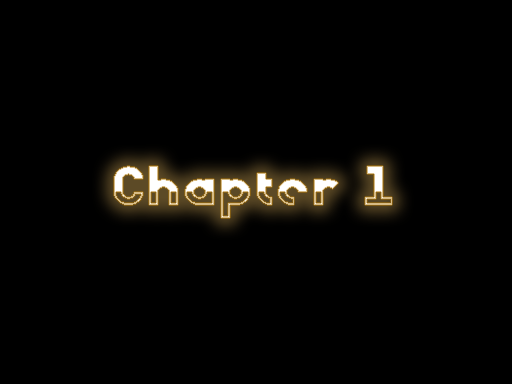
<style>
.page{position:relative;width:512px;height:384px;background:#000000}
.page>*{position:absolute;margin:0}
.t1{font:64.3px "Eviolite";letter-spacing:0.04em;scale:1.13 1}
</style>
<div class="page">
<p class="t1" style="left:114px;top:166px;width:278px;height:52px">Chapter 1</p>
</div>
